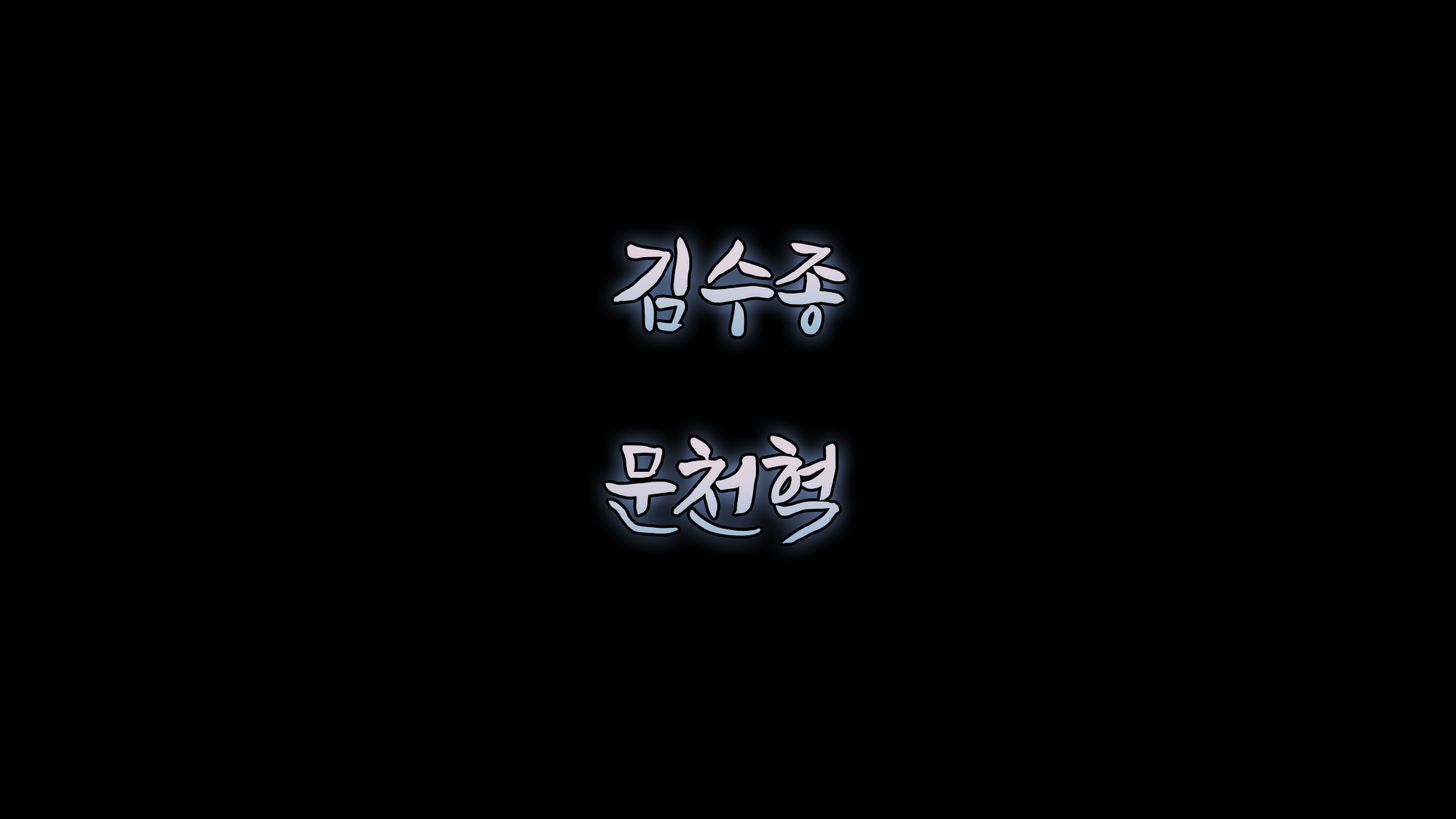
<style>
.page{position:relative;width:1456px;height:819px;background:#000000}
.page>*{position:absolute;margin:0}
.t1{font:117.9px "JSArirangPPURI-Regular";letter-spacing:-0.02em;color:#cecddc}
.t2{font:117.9px "JSArirangPPURI-Regular";letter-spacing:-0.02em;color:#d3d0dd}
</style>
<div class="page">
<p class="t1" style="left:613px;top:237px;width:233px;height:100px">김수종</p>
<p class="t2" style="left:605px;top:435px;width:234px;height:109px">문천혁</p>
</div>
